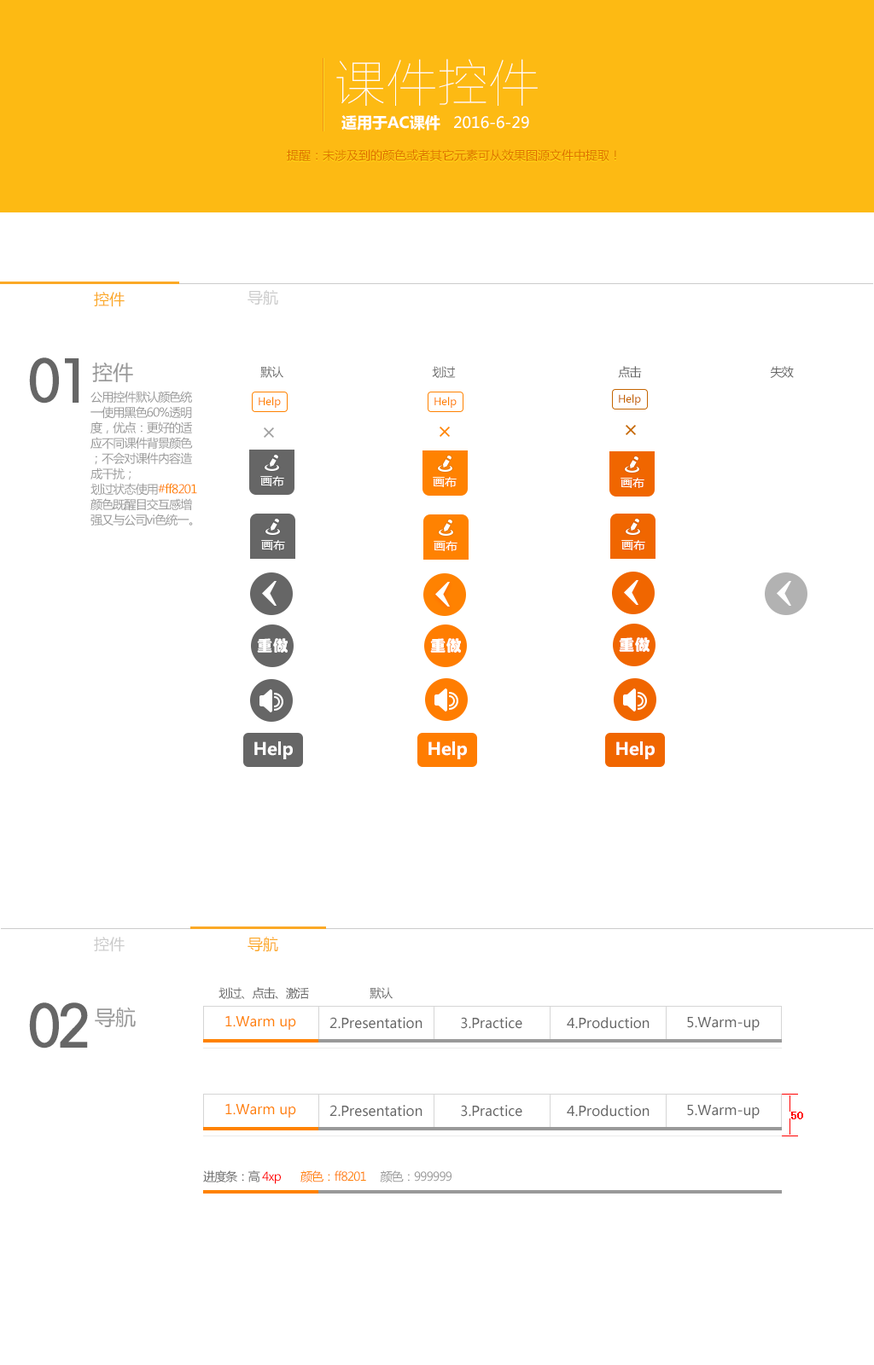
<style>
.page{position:relative;width:874px;height:1365px;background:#ffffff}
.page>*{position:absolute;margin:0}
.t1{font:51.2px "FZLTCXHJW--GB1-0";color:#ffffff}
.t2{font:15.4px "MicrosoftYaHei-Bold";color:#ffffff}
.t3{font:15.4px "MicrosoftYaHei";color:#ffffff}
.t4{font:11.9px "MicrosoftYaHei";color:#de6e00}
.t5{font:15.4px "MicrosoftYaHei";color:#fba926}
.t6{font:15.4px "MicrosoftYaHei";color:#cbcbcb}
.t7{font:61.4px "FZMHJW--GB1-0";letter-spacing:-0.06em;color:#666666}
.t8{font:20.5px "MicrosoftYaHei";color:#999999}
.t9{font:11.9px "MicrosoftYaHei";letter-spacing:-0.06em;color:#666666}
.t10{font:11.9px/15.4px "MicrosoftYaHei";letter-spacing:-0.06em;color:#999999}
.t11{font:11.9px/15.4px "MicrosoftYaHei";letter-spacing:-0.06em;color:#ff8201}
.t12{font:10.2px "MicrosoftYaHei";color:#ff8200}
.t13{font:10.2px "MicrosoftYaHei";color:#c46400}
.t14{font:11.9px "MicrosoftYaHei";color:#ffffff}
.t15{font:15.4px "STHupo";color:#ffffff}
.t16{font:17.1px "MicrosoftYaHei-Bold";color:#ffffff}
.t17{font:13.6px "MicrosoftYaHei";color:#ff8201}
.t18{font:13.6px "MicrosoftYaHei";color:#666666}
.t19{font:11.9px "SimSun";color:#ff0000;font-weight:bold}
.t20{font:11.9px "MicrosoftYaHei";letter-spacing:-0.06em;color:#ff8201}
.t21{font:11.9px "MicrosoftYaHei";letter-spacing:-0.06em;color:#ff0000}
.t22{font:11.9px "MicrosoftYaHei";letter-spacing:-0.06em;color:#999999}
</style>
<div class="page">
<p class="t1" style="left:336px;top:59px;width:201px;height:47px">课件控件</p>
<p class="t2" style="left:341px;top:115px;width:99px;height:16px">适用于AC课件</p>
<p class="t3" style="left:454px;top:116px;width:75px;height:13px">2016-6-29</p>
<p class="t4" style="left:287px;top:149px;width:329px;height:12px">提醒：未涉及到的颜色或者其它元素可从效果图源文件中提取！</p>
<p class="t5" style="left:94px;top:292px;width:31px;height:15px">控件</p>
<p class="t6" style="left:247px;top:290px;width:31px;height:15px">导航</p>
<p class="t7" style="left:29px;top:357px;width:50px;height:47px">01</p>
<p class="t8" style="left:92px;top:362px;width:41px;height:20px">控件</p>
<p class="t9" style="left:260px;top:366px;width:533px;height:12px">默认                                                     划过                                                          点击                                              失效</p>
<p class="t10" style="left:90px;top:391px;width:107px;height:135px">公用控件默认颜色统一使用黑色60%透明度，优点：更好的适应不同课件背景颜色；不会对课件内容造成干扰；<br>划过状态使用<span class="t11">#ff8201<br></span>颜色既醒目交互感增强又与公司vi色统一。</p>
<p class="t12" style="left:258px;top:397px;width:23px;height:11px">Help</p>
<p class="t12" style="left:434px;top:397px;width:22px;height:11px">Help</p>
<p class="t13" style="left:619px;top:394px;width:22px;height:11px">Help</p>
<p class="t14" style="left:260px;top:476px;width:24px;height:10px">画布</p>
<p class="t14" style="left:433px;top:477px;width:23px;height:10px">画布</p>
<p class="t14" style="left:620px;top:478px;width:24px;height:10px">画布</p>
<p class="t14" style="left:261px;top:540px;width:24px;height:10px">画布</p>
<p class="t14" style="left:433px;top:541px;width:24px;height:10px">画布</p>
<p class="t14" style="left:621px;top:540px;width:24px;height:10px">画布</p>
<p class="t15" style="left:257px;top:638px;width:30px;height:15px">重做</p>
<p class="t15" style="left:430px;top:638px;width:31px;height:15px">重做</p>
<p class="t15" style="left:619px;top:637px;width:30px;height:15px">重做</p>
<p class="t16" style="left:254px;top:741px;width:39px;height:18px">Help</p>
<p class="t16" style="left:428px;top:741px;width:39px;height:18px">Help</p>
<p class="t16" style="left:616px;top:741px;width:38px;height:18px">Help</p>
<p class="t6" style="left:94px;top:937px;width:31px;height:15px">控件</p>
<p class="t5" style="left:247px;top:937px;width:31px;height:15px">导航</p>
<p class="t9" style="left:218px;top:987px;width:91px;height:12px">划过、点击、激活</p>
<p class="t9" style="left:369px;top:987px;width:23px;height:12px">默认</p>
<p class="t7" style="left:29px;top:1002px;width:59px;height:46px">02</p>
<p class="t8" style="left:95px;top:1007px;width:41px;height:21px">导航</p>
<p class="t17" style="left:225px;top:1015px;width:71px;height:15px">1.Warm up</p>
<p class="t18" style="left:329px;top:1017px;width:93px;height:12px">2.Presentation</p>
<p class="t18" style="left:461px;top:1017px;width:61px;height:12px">3.Practice</p>
<p class="t18" style="left:566px;top:1017px;width:83px;height:12px">4.Production</p>
<p class="t18" style="left:687px;top:1017px;width:72px;height:14px">5.Warm-up</p>
<p class="t17" style="left:225px;top:1103px;width:71px;height:15px">1.Warm up</p>
<p class="t18" style="left:329px;top:1105px;width:93px;height:12px">2.Presentation</p>
<p class="t18" style="left:461px;top:1105px;width:61px;height:12px">3.Practice</p>
<p class="t18" style="left:566px;top:1105px;width:83px;height:12px">4.Production</p>
<p class="t18" style="left:687px;top:1105px;width:72px;height:13px">5.Warm-up</p>
<p class="t19" style="left:791px;top:1112px;width:12px;height:7px">50</p>
<p class="t20" style="left:203px;top:1170px;width:248px;height:14px"><span class="t9">进度条：高 </span><span class="t21">4xp       </span>颜色：ff8201     <span class="t22">颜色：999999</span></p>
</div>
